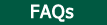
<style>
.page{position:relative;width:107px;height:25px;background:#005941}
.page>*{position:absolute;margin:0}
.t1{font:18px "Tahoma";letter-spacing:0.02em;color:#ffffff;font-weight:bold}
</style>
<div class="page">
<p class="t1" style="left:31px;top:4px;width:43px;height:18px">FAQs</p>
</div>
